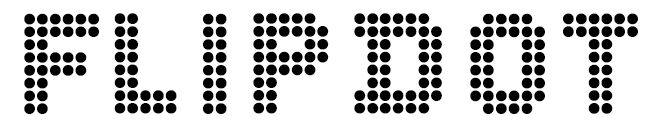
<style>
.page{position:relative;width:652px;height:130px;background:#ffffff}
.page>*{position:absolute;margin:0}
.t1{font:125px "CFDots-Regular";color:#000000;font-weight:bold}
</style>
<div class="page">
<p class="t1" style="left:24px;top:13px;width:614px;height:101px">FLIPDOT</p>
</div>
